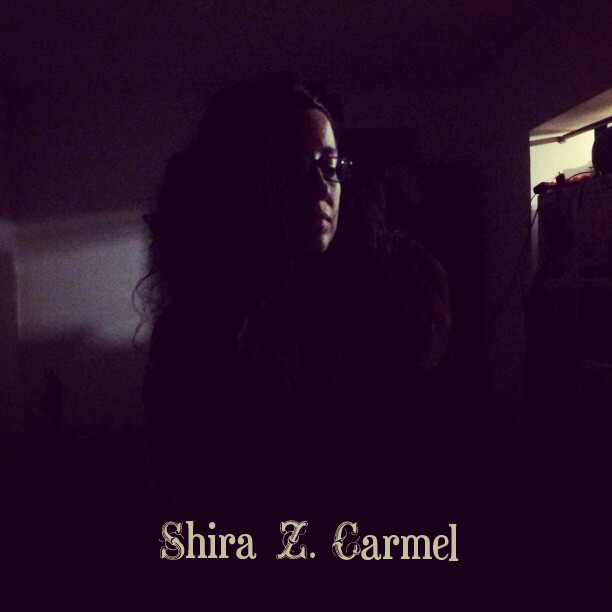
<style>
.page{position:relative;width:612px;height:612px;background:#1a0019}
.page>*{position:absolute;margin:0}
.t1{font:48.2px "ExtraOrnamentalNo2";color:#c4bfa1}
.t2{font:48.2px "Euphorigenic-Regular";color:#c4bfa1}
.t3{font:36.9px "Euphorigenic-Regular";color:#c4bfa1}
</style>
<div class="page">
<p class="t1" style="left:159px;top:521px;width:26px;height:39px">S</p>
<p class="t2" style="left:186px;top:521px;width:71px;height:38px">hira</p>
<p class="t1" style="left:276px;top:520px;width:32px;height:39px">Z</p>
<p class="t1" style="left:332px;top:521px;width:29px;height:39px">C</p>
<p class="t2" style="left:449px;top:524px;width:10px;height:37px">l</p>
<p class="t2" style="left:361px;top:535px;width:88px;height:25px">arme</p>
<p class="t3" style="left:310px;top:552px;width:5px;height:6px">.</p>
</div>
